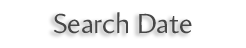
<style>
.page{position:relative;width:246px;height:48px;background:#ffffff}
.page>*{position:absolute;margin:0}
.t1{font:28px "Amira-Roman";color:#474747}
</style>
<div class="page">
<p class="t1" style="left:53px;top:12px;width:139px;height:22px">Search Date</p>
</div>
